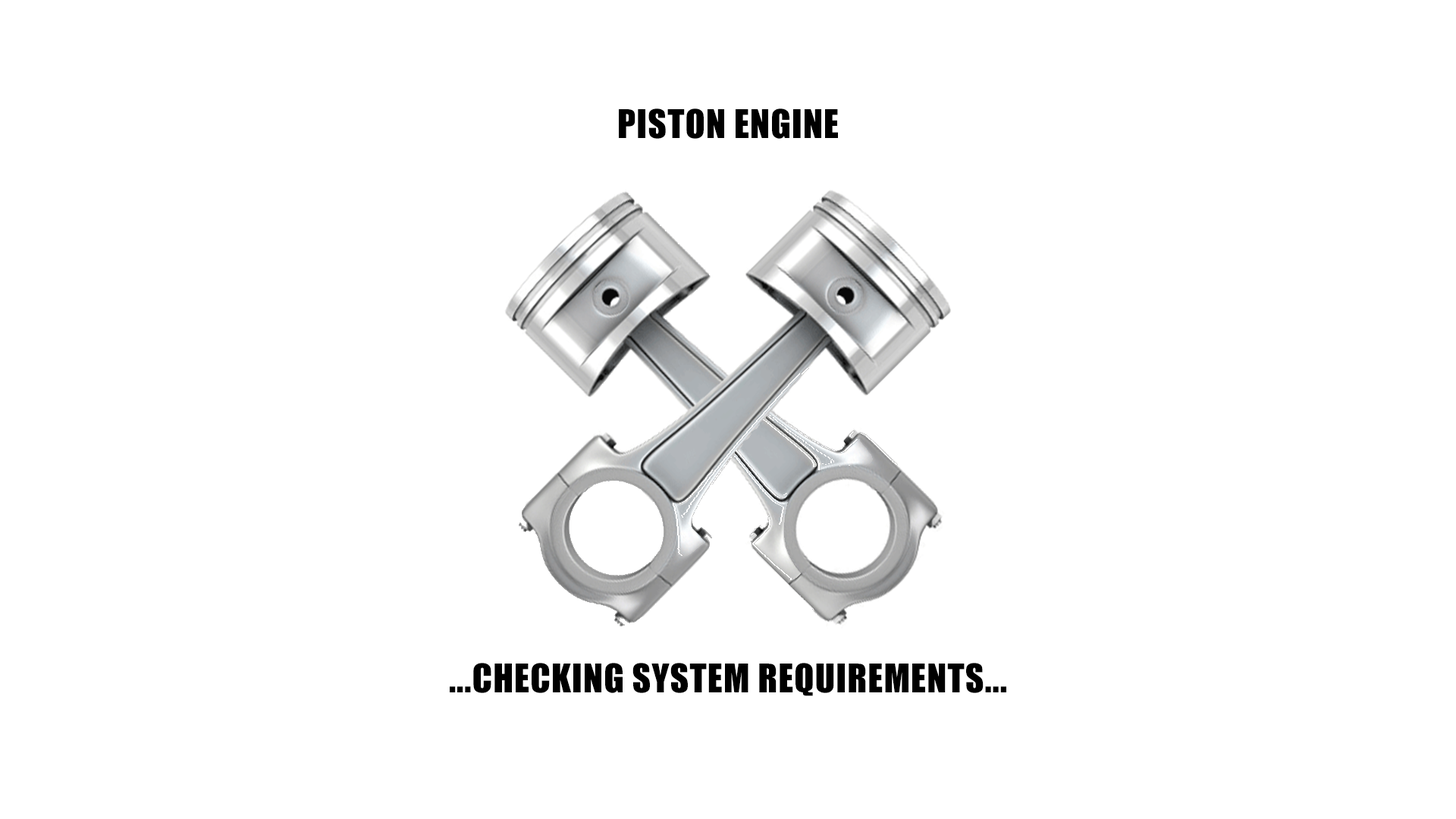
<style>
.page{position:relative;width:1456px;height:819px;background:#ffffff}
.page>*{position:absolute;margin:0}
.t1{font:36.4px "Impact";letter-spacing:0.025em;color:#000000}
</style>
<div class="page">
<p class="t1" style="left:619px;top:108px;width:219px;height:31px">PISTON ENGINE</p>
<p class="t1" style="left:450px;top:663px;width:556px;height:33px">...CHECKING SYSTEM REQUIREMENTS...</p>
</div>
